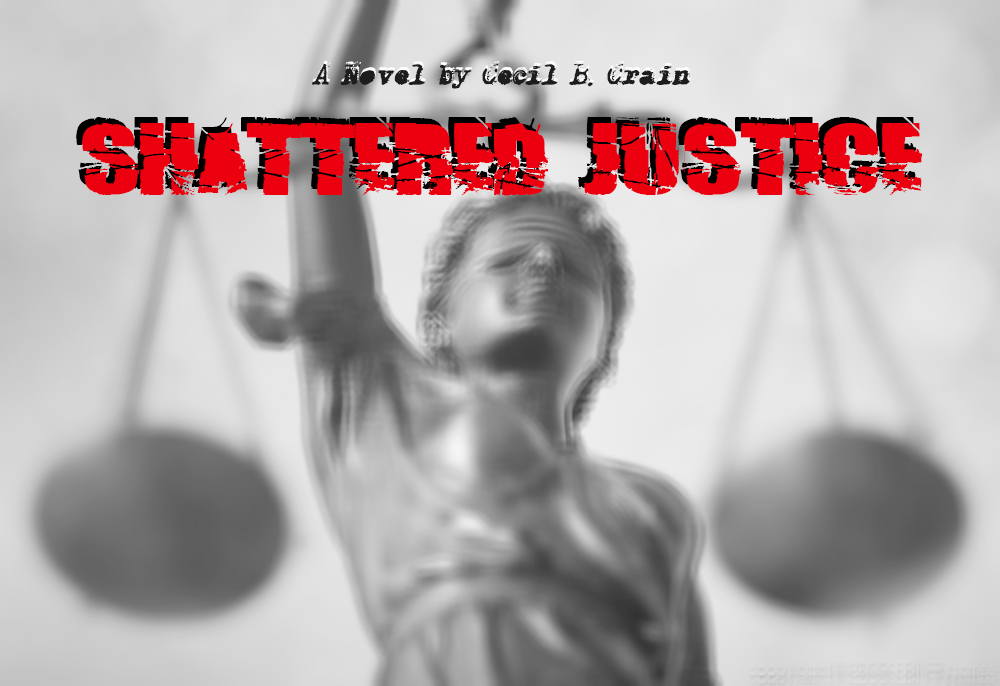
<style>
.page{position:relative;width:1000px;height:686px}
.page>*{position:absolute;margin:0}
.t1{font:30px "X-ClassifiedItalic";color:#1d1d1d}
.t2{font:30px "TheCopenhagener";color:#1d1d1d}
.t3{font:72px "Broken74"}
.t4{font:72px "Broken74";color:#ec0010}
</style>
<div class="page">
<p class="t1" style="left:312px;top:64px;width:378px;height:25px"><span class="t2">A </span>A Novel by Cecil B. Crain</p>
<p class="t3" style="left:76px;top:117px;width:841px;height:73px">Shattered Justice</p>
<p class="t4" style="left:82px;top:123px;width:841px;height:73px">Shattered Justice</p>
</div>
